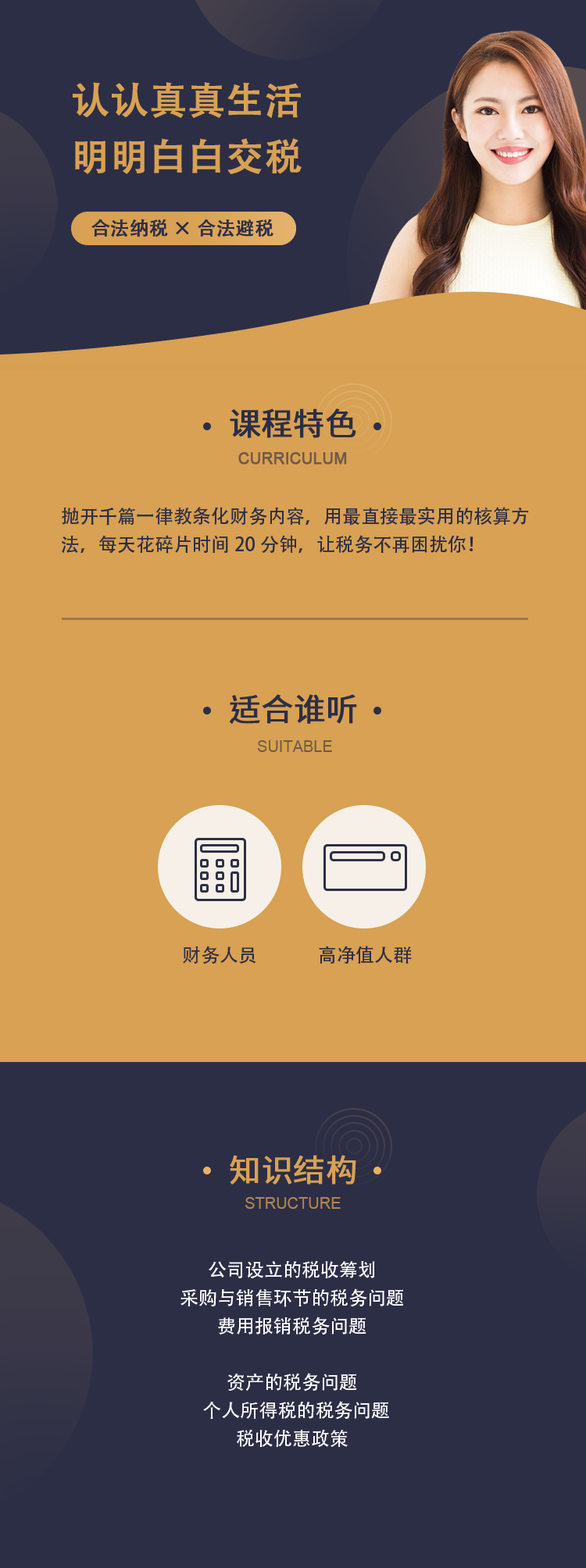
<style>
.page{position:relative;width:586px;height:1568px;background:#d8a153}
.page>*{position:absolute;margin:0}
.t1{font:37.5px/56.2px "AdobeHeitiStd-Regular";color:#d8a153;font-weight:bold}
.t2{font:18.7px "AdobeHeitiStd-Regular";color:#2c2e46;font-weight:bold}
.t3{font:31.2px "SourceHanSansSC-Regular";color:#2c2e46;font-weight:bold}
.t4{font:15.6px "ArialMT";color:#70594a;font-weight:bold}
.t5{font:18.7px/28.1px "SourceHanSansSC-Regular";color:#2c2e46}
.t6{font:15.6px "ArialMT";color:#70594a}
.t7{font:18.7px "AdobeHeitiStd-Regular";color:#2c2e46}
.t8{font:18.7px "SourceHanSansSC-Regular";color:#2c2e46}
.t9{font:31.2px "SourceHanSansSC-Regular";color:#d8a153;font-weight:bold}
.t10{font:15.6px "ArialMT";color:#b1854f}
.t11{font:18.7px/28.1px "SourceHanSansSC-Regular";color:#fffffe}
</style>
<div class="page">
<p class="t1" style="left:73px;top:82px;width:228px;height:92px">认认真真生活<br>明明白白交税</p>
<p class="t2" style="left:91px;top:219px;width:182px;height:18px">合法纳税 ×合法避税</p>
<p class="t3" style="left:230px;top:408px;width:126px;height:30px">课程特色</p>
<p class="t4" style="left:238px;top:452px;width:109px;height:13px">CURRICULUM</p>
<p class="t5" style="left:62px;top:507px;width:466px;height:47px">抛开千篇一律教条化财务内容，用最直接最实用的核算方法，每天花碎片时间20分钟，让税务不再困扰你！</p>
<p class="t3" style="left:230px;top:694px;width:127px;height:30px">适合谁听</p>
<p class="t6" style="left:257px;top:740px;width:75px;height:12px">SUITABLE</p>
<p class="t7" style="left:183px;top:946px;width:73px;height:18px">财务人员</p>
<p class="t8" style="left:319px;top:946px;width:93px;height:18px">高净值人群</p>
<p class="t9" style="left:230px;top:1155px;width:126px;height:30px">知识结构</p>
<p class="t10" style="left:245px;top:1197px;width:95px;height:12px">STRUCTURE</p>
<p class="t11" style="left:180px;top:1260px;width:224px;height:187px;text-align:center">公司设立的税收筹划  <br>采购与销售环节的税务问题   <br>费用报销税务问题<br><br>资产的税务问题<br>  个人所得税的税务问题  <br>税收优惠政策</p>
</div>
